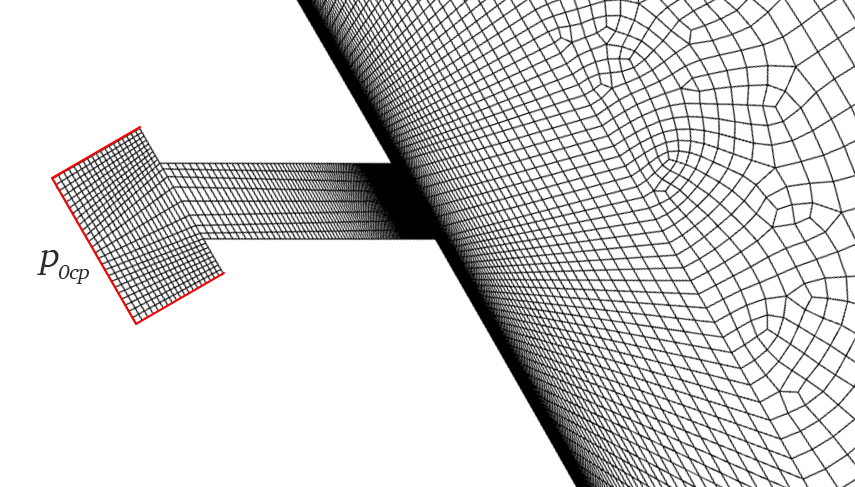
<style>
.page{position:relative;width:855px;height:487px;background:#ffffff}
.page>*{position:absolute;margin:0}
.t1{font:36px "Charter-Roman";letter-spacing:-0.02em;color:#2f292b;font-style:italic}
</style>
<div class="page">
<p class="t1" style="left:37px;top:250px;width:53px;height:34px">p0cp</p>
</div>
